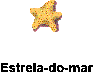
<style>
.page{position:relative;width:93px;height:72px;background:#ffffff}
.page>*{position:absolute;margin:0}
.t1{font:12.8px "Arial-BoldMT";color:#000000;scale:1.03 1}
</style>
<div class="page">
<p class="t1" style="left:0px;top:62px;width:94px;height:11px">Estrela-do-mar</p>
</div>
